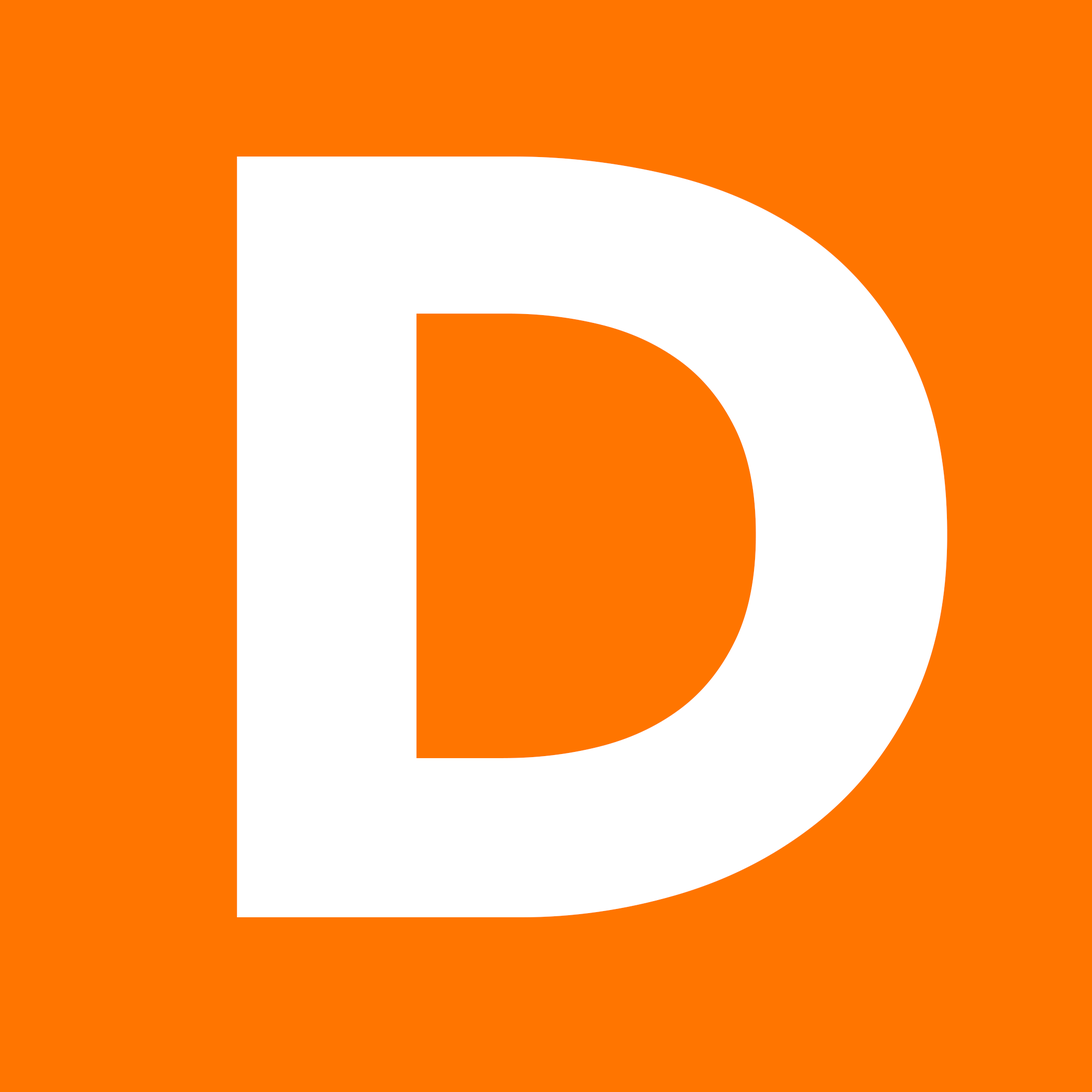
<style>
.page{position:relative;width:1092px;height:1092px;background:#ff7500}
.page>*{position:absolute;margin:0}
.t1{font:257.8px "AvenirNext-Bold";color:#ffffff}
</style>
<div class="page">
<p class="t1" style="left:237px;top:157px;width:710px;height:760px;text-align:center">D</p>
</div>
